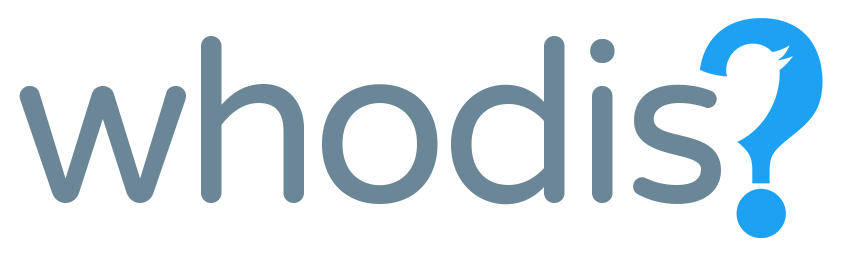
<style>
.page{position:relative;width:846px;height:256px;background:#ffffff}
.page>*{position:absolute;margin:0}
.t1{font:226px "VarelaRound";letter-spacing:-0.04em;color:#6a8697}
</style>
<div class="page">
<p class="t1" style="left:19px;top:36px;width:702px;height:169px">whodis</p>
</div>
